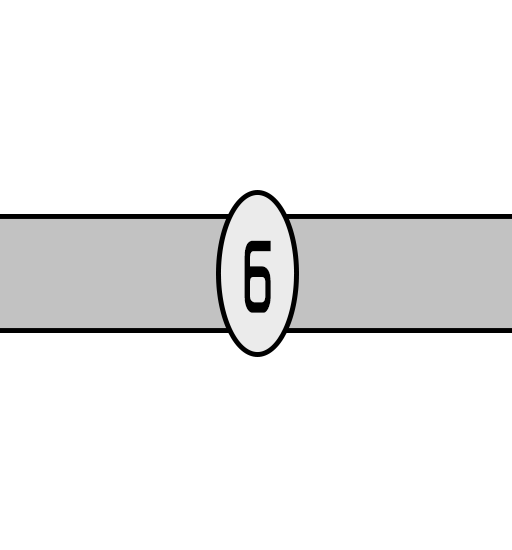
<style>
.page{position:relative;width:512px;height:550px;background:#ffffff}
.page>*{position:absolute;margin:0}
.t1{font:99.9px "PrisonerSF";color:#000000;scale:0.5 1}
</style>
<div class="page">
<p class="t1" style="left:244px;top:240px;width:27px;height:73px">6</p>
</div>
